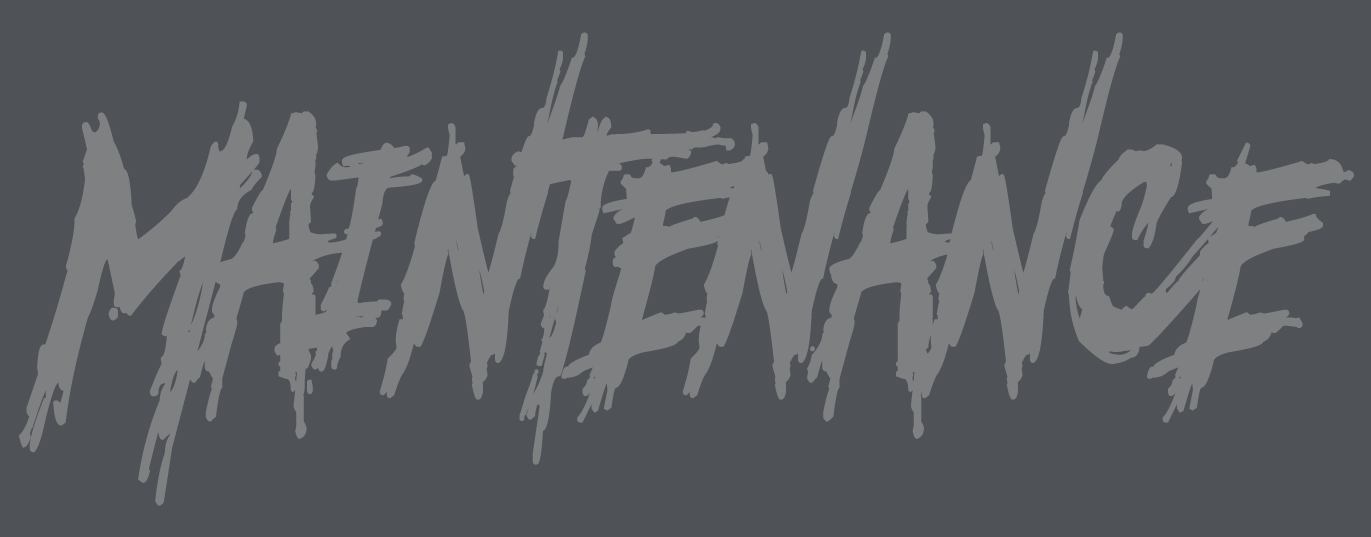
<style>
.page{position:relative;width:1371px;height:537px;background:#4f5256}
.page>*{position:absolute;margin:0}
.t1{font:452.8px "AnotherAmerica";color:#7e8082;font-weight:bold;scale:0.87 1}
</style>
<div class="page">
<p class="t1" style="left:19px;top:32px;width:1335px;height:474px">Maintenance</p>
</div>
